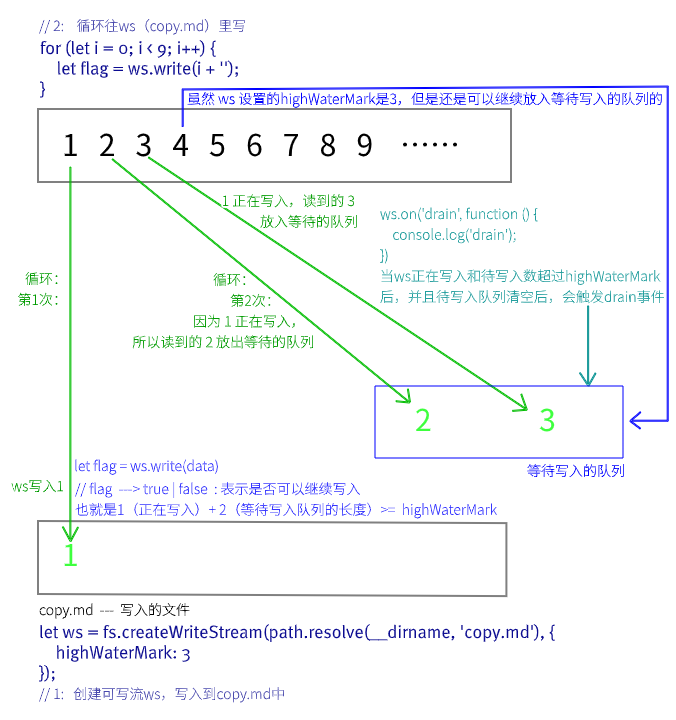
<style>
.page{position:relative;width:676px;height:720px;background:#ffffff}
.page>*{position:absolute;margin:0}
.t1{font:14px "SourceHanSansSC-Light";color:#4949ad}
.t2{font:18px "MetaNormal-Roman";color:#0c0c91}
.t3{font:14px "SourceHanSansSC-Light";color:#0000ff}
.t4{font:30px "SourceHanSansSC-Regular";color:#000000}
.t5{font:14px "SourceHanSansSC-Light";color:#009b00}
.t6{font:14px "SourceHanSansSC-Light";color:#239e9e}
.t7{font:30px "SourceHanSansSC-Regular";color:#3eff3e}
.t8{font:14px "SourceHanSansSC-Light";color:#3535ff}
.t9{font:14px "SourceHanSansSC-Light";color:#000000}
</style>
<div class="page">
<p class="t1" style="left:39px;top:19px;width:207px;height:16px">// 2:    循环往ws（copy.md）里写</p>
<p class="t2" style="left:40px;top:40px;width:199px;height:58px">for (let i = 0; i &lt; 9; i++) {<br>    let flag = ws.write(i + '');<br>}</p>
<p class="t3" style="left:187px;top:92px;width:475px;height:16px">虽然 ws 设置的highWaterMark是3，但是还是可以继续放入等待写入的队列的</p>
<p class="t4" style="left:64px;top:133px;width:393px;height:24px">1   2   3   4   5   6   7   8   9    ……</p>
<p class="t5" style="left:222px;top:194px;width:135px;height:34px;text-align:right">1 正在写入，读到的 3 <br>放入等待的队列</p>
<p class="t6" style="left:380px;top:207px;width:284px;height:97px">ws.on('drain', function () {<br>    console.log('drain');<br>})<br>当ws正在写入和待写入数超过highWaterMark<br>后，并且待写入队列清空后，会触发drain事件</p>
<p class="t5" style="left:11px;top:272px;width:52px;height:221px;text-align:right">循环：<br>第1次：<br><br><br><br><br><br><br><br><br>ws写入1</p>
<p class="t5" style="left:132px;top:273px;width:181px;height:76px;text-align:right">循环：                   <br>第2次：           <br>因为 1 正在写入，   <br>所以读到的 2 放出等待的队列</p>
<p class="t7" style="left:416px;top:408px;width:139px;height:24px">2                3</p>
<p class="t8" style="left:75px;top:459px;width:143px;height:16px">let flag = ws.write(data)</p>
<p class="t3" style="left:527px;top:464px;width:97px;height:14px">等待写入的队列</p>
<p class="t8" style="left:75px;top:482px;width:422px;height:37px">// flag  ---&gt; true | false  : 表示是否可以继续写入<br>也就是1（正在写入）+ 2（等待写入队列的长度）&gt;=  highWaterMark</p>
<p class="t7" style="left:64px;top:544px;width:13px;height:22px">1</p>
<p class="t9" style="left:39px;top:603px;width:151px;height:16px">copy.md  ---  写入的文件</p>
<p class="t2" style="left:39px;top:624px;width:516px;height:58px">let ws = fs.createWriteStream(path.resolve(__dirname, 'copy.md'), {<br>    highWaterMark: 3 <br>});</p>
<p class="t1" style="left:39px;top:687px;width:245px;height:16px">// 1:   创建可写流ws，写入到copy.md中</p>
</div>
